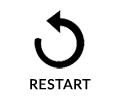
<style>
.page{position:relative;width:120px;height:100px;background:#ffffff}
.page>*{position:absolute;margin:0}
.t1{font:14px "Lato-Medium";letter-spacing:0.04em;color:#000000;text-transform:uppercase}
</style>
<div class="page">
<p class="t1" style="left:30px;top:79px;width:61px;height:11px">RESTART</p>
</div>
